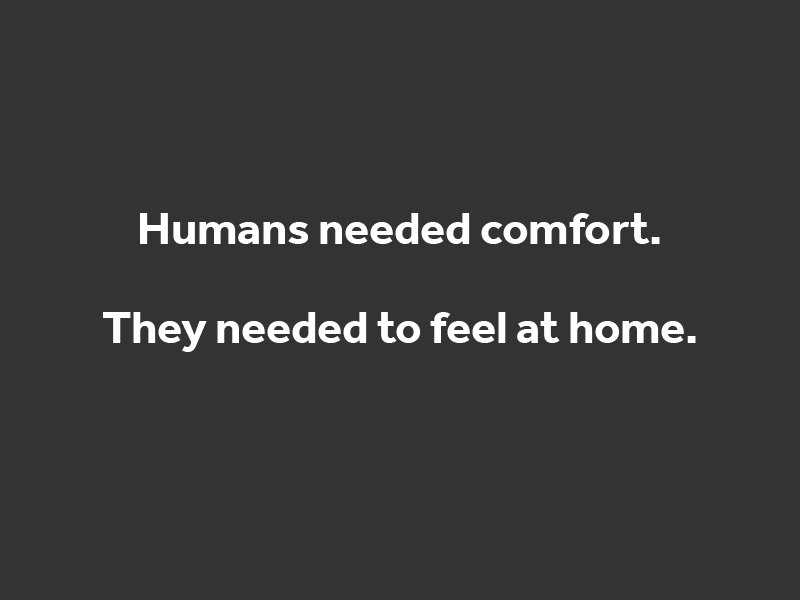
<style>
.page{position:relative;width:800px;height:600px;background:#333333}
.page>*{position:absolute;margin:0}
.t1{font:46.5px "Effra-Bold";color:#ffffff}
</style>
<div class="page">
<p class="t1" style="left:140px;top:213px;width:520px;height:31px">Humans needed comfort.</p>
<p class="t1" style="left:103px;top:312px;width:593px;height:40px">They needed to feel at home.</p>
</div>
